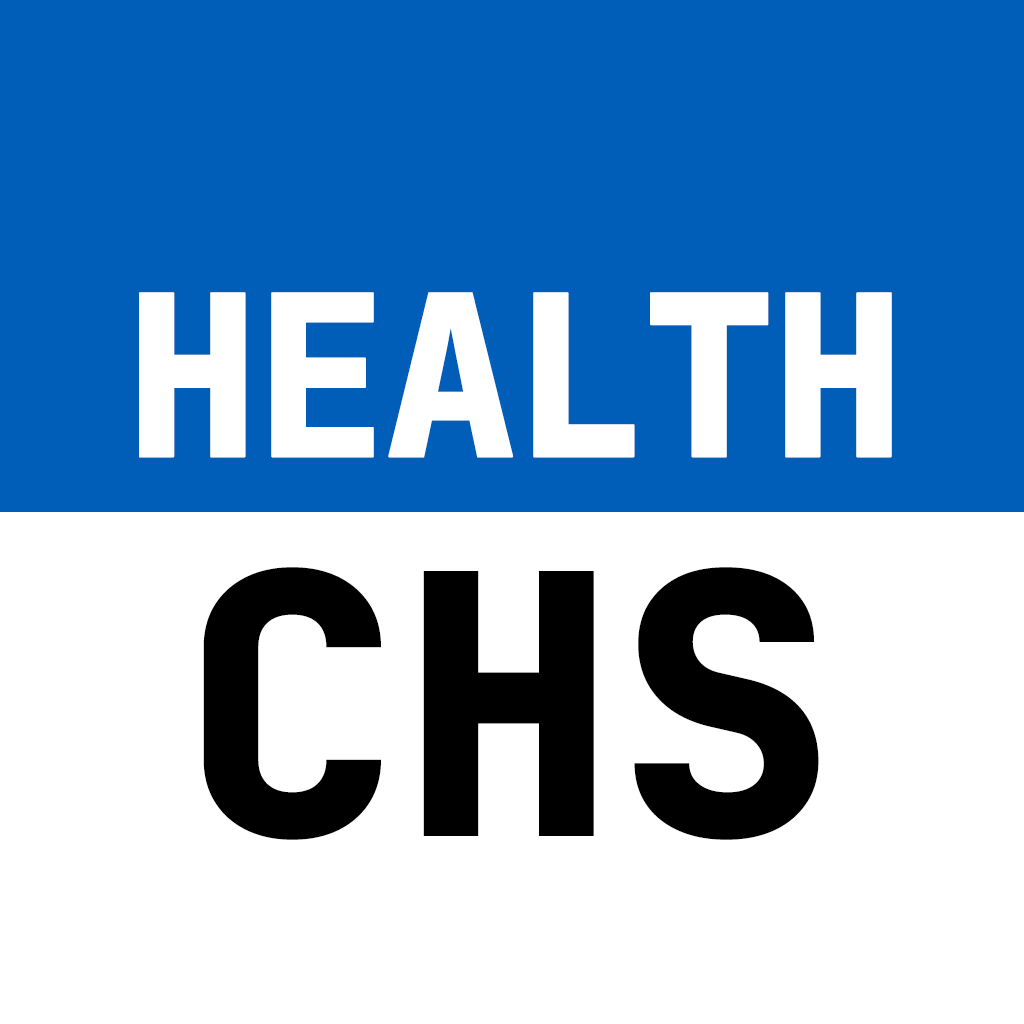
<style>
.page{position:relative;width:1024px;height:1024px;background:#ffffff}
.page>*{position:absolute;margin:0}
.t1{font:224px "JetBrainsMono-ExtraBold";letter-spacing:-0.05em;color:#ffffff;text-transform:uppercase;font-weight:bold}
.t2{font:363px "JetBrainsMono-ExtraBold";color:#000000;text-transform:uppercase}
</style>
<div class="page">
<p class="t1" style="left:139px;top:292px;width:753px;height:166px">HEALTH</p>
<p class="t2" style="left:203px;top:567px;width:616px;height:273px">CHS</p>
</div>
